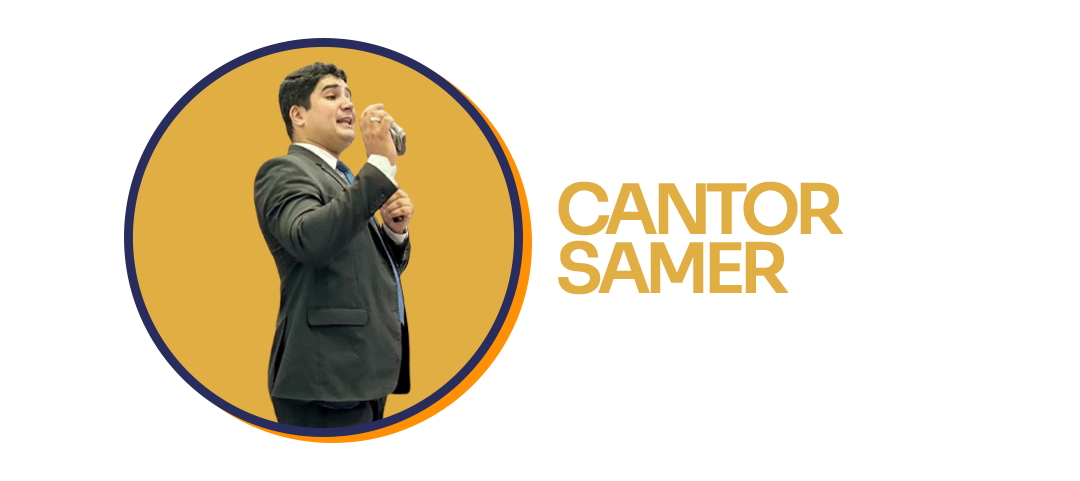
<style>
.page{position:relative;width:1080px;height:481px;background:#ffffff}
.page>*{position:absolute;margin:0}
.t1{font:68.2px/59.1px "Sora-Medium";letter-spacing:-0.1em;color:#e1ae43;text-transform:uppercase;font-weight:bold}
</style>
<div class="page">
<p class="t1" style="left:558px;top:181px;width:285px;height:114px">cantor<br>samer</p>
</div>
